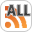
<style>
.page{position:relative;width:32px;height:32px;background:#ffffff}
.page>*{position:absolute;margin:0}
.t1{font:16.1px "FrutigerLT-ExtraBlackCn";letter-spacing:-0.025em;font-weight:bold;scale:0.87 1}
</style>
<div class="page">
<p class="t1" style="left:6px;top:4px;width:25px;height:12px">ALL</p>
</div>
